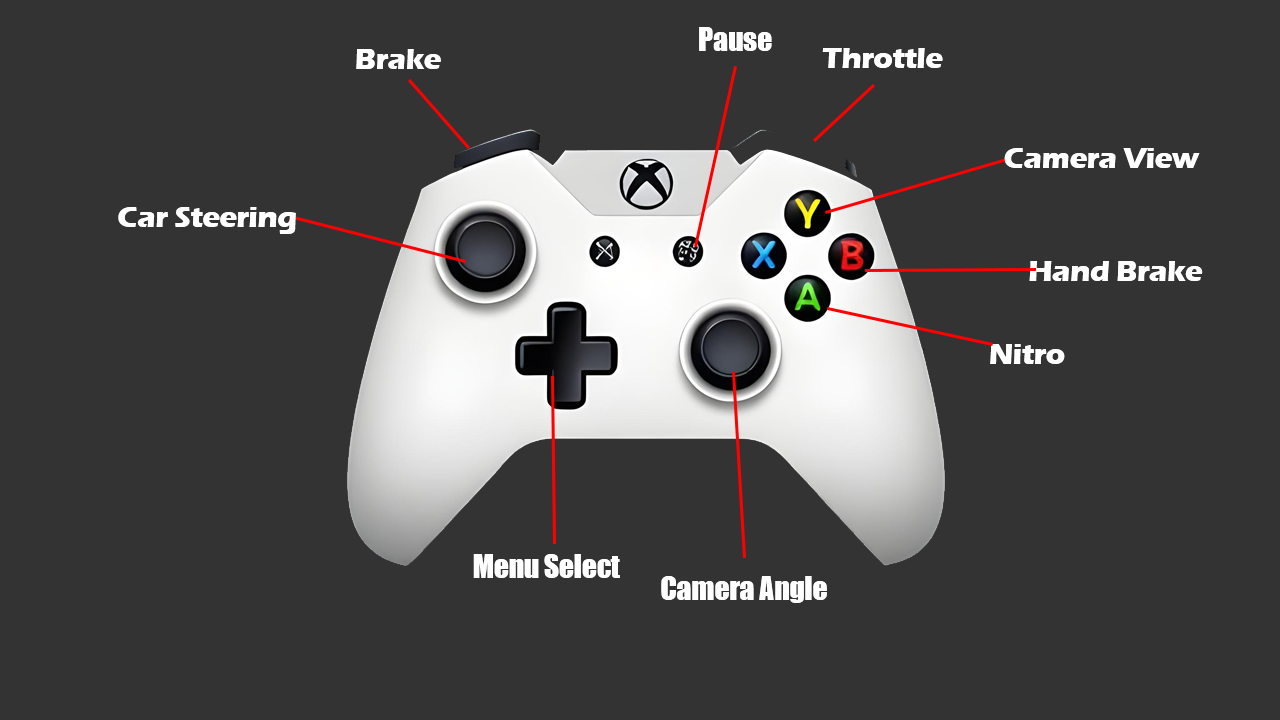
<style>
.page{position:relative;width:1280px;height:720px;background:#333333}
.page>*{position:absolute;margin:0}
.t1{font:30px "Impact";letter-spacing:-0.015em;color:#ffffff}
.t2{font:30px "ErasITC-Bold";letter-spacing:-0.015em;color:#ffffff}
</style>
<div class="page">
<p class="t1" style="left:699px;top:27px;width:73px;height:24px">Pause</p>
<p class="t2" style="left:356px;top:49px;width:85px;height:20px">Brake</p>
<p class="t2" style="left:822px;top:48px;width:121px;height:20px">Throttle</p>
<p class="t2" style="left:1004px;top:148px;width:196px;height:20px">Camera View</p>
<p class="t2" style="left:118px;top:207px;width:178px;height:27px">Car Steering</p>
<p class="t2" style="left:1029px;top:261px;width:174px;height:20px">Hand Brake</p>
<p class="t2" style="left:990px;top:344px;width:75px;height:20px">Nitro</p>
<p class="t1" style="left:473px;top:554px;width:147px;height:24px">Menu Select</p>
<p class="t1" style="left:661px;top:576px;width:166px;height:27px">Camera Angle</p>
</div>
